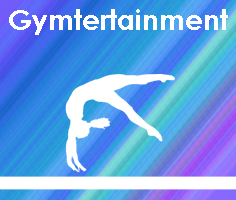
<style>
.page{position:relative;width:236px;height:200px}
.page>*{position:absolute;margin:0}
.t1{font:28px "CenturyGothic-Bold";color:#ffffff}
</style>
<div class="page">
<p class="t1" style="left:9px;top:9px;width:219px;height:26px">Gymtertainment</p>
</div>
